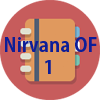
<style>
.page{position:relative;width:100px;height:100px;background:#c75c5c}
.page>*{position:absolute;margin:0}
.t1{font:18.4px "AdobeGothicStd-Bold";color:#0d1d98}
</style>
<div class="page">
<p class="t1" style="left:5px;top:37px;width:92px;height:15px">Nirvana OF</p>
<p class="t1" style="left:45px;top:60px;width:6px;height:14px">1</p>
</div>
